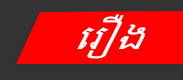
<style>
.page{position:relative;width:183px;height:80px;background:#ff0000}
.page>*{position:absolute;margin:0}
.t1{font:33.1px "NiDASowanaphum";color:#ffffff;scale:1.24 1}
</style>
<div class="page">
<p class="t1" style="left:77px;top:14px;width:69px;height:45px">រឿង</p>
</div>
